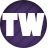
<style>
.page{position:relative;width:48px;height:48px;background:#ffffff}
.page>*{position:absolute;margin:0}
.t1{font:36px "MinstrelPosterWHG";color:#ffffff;scale:0.89 1}
</style>
<div class="page">
<p class="t1" style="left:2px;top:13px;width:43px;height:23px">tw</p>
</div>
